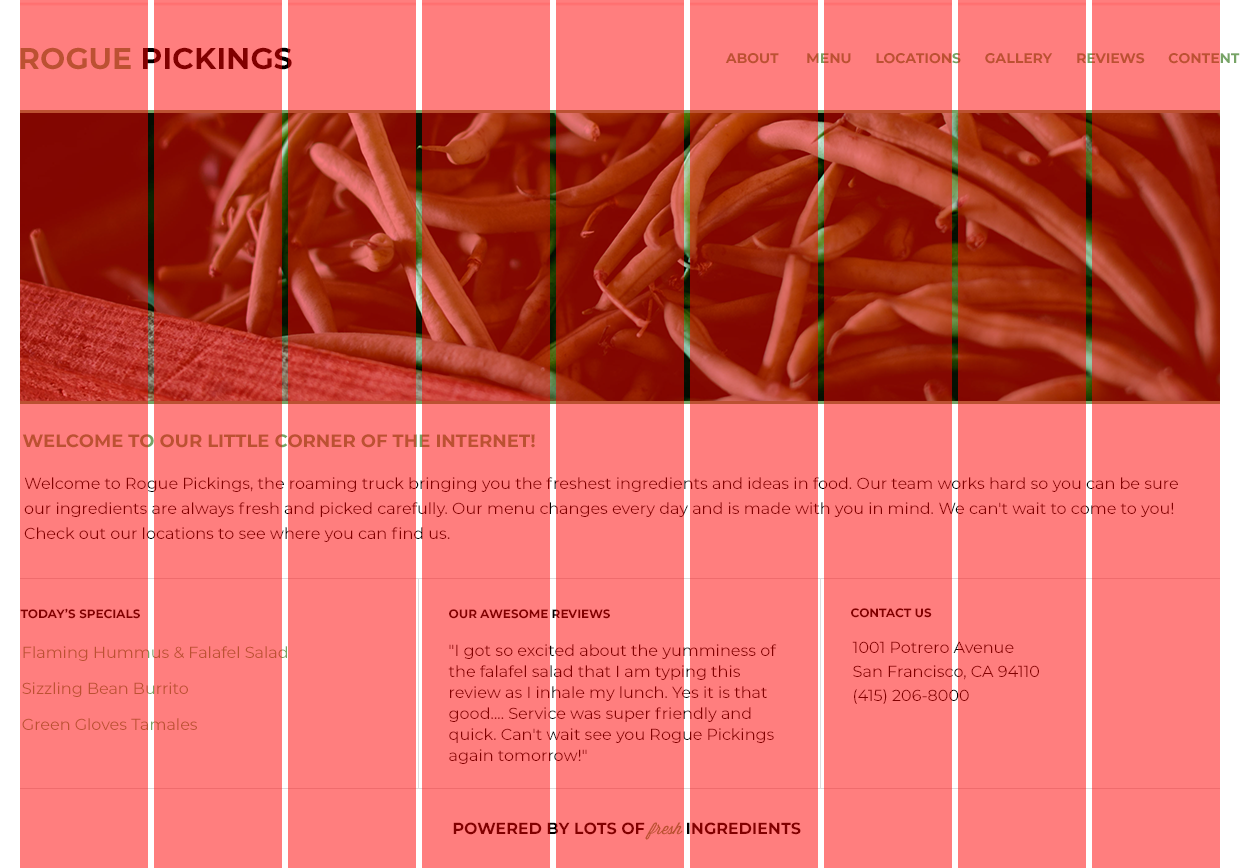
<style>
.page{position:relative;width:1240px;height:868px;background:#ff7e7e}
.page>*{position:absolute;margin:0}
.t1{font:30px "Montserrat-Bold";text-transform:uppercase}
.t2{font:14px "Montserrat-Bold";color:#bc5132;text-transform:uppercase}
.t3{font:18px "Montserrat-Bold";color:#bc5132;text-transform:uppercase}
.t4{font:16px/25px "Montserrat-Regular";color:#810000}
.t5{font:12px "Montserrat-Bold";color:#810000;text-transform:uppercase}
.t6{font:16px/24px "Montserrat-Regular";color:#810000}
.t7{font:16px/18px "Montserrat-Regular";color:#bc5132}
.t8{font:16px/21px "Montserrat-Regular";color:#810000}
.t9{font:16px "Montserrat-Bold";color:#810000;text-transform:uppercase}
.t10{font:16px "Wisdom-Script";color:#bc5132}
</style>
<div class="page">
<p class="t1" style="left:20px;top:47px;width:272px;height:23px">Rogue Pickings</p>
<p class="t2" style="left:725px;top:53px;width:515px;height:11px">about       menu      locations      GALLERY      REVIEWS      CONTENT</p>
<p class="t3" style="left:22px;top:434px;width:513px;height:14px">Welcome to our little corner of the internet!</p>
<p class="t4" style="left:24px;top:477px;width:1154px;height:65px">Welcome to Rogue Pickings, the roaming truck bringing you the freshest ingredients and ideas in food. Our team works hard so you can be sure our ingredients are always fresh and picked carefully. Our menu changes every day and is made with you in mind. We can't wait to come to you! Check out our locations to see where you can find us.</p>
<p class="t5" style="left:20px;top:608px;width:120px;height:11px">Today’s Specials</p>
<p class="t5" style="left:449px;top:609px;width:161px;height:10px">OUR AWESOME REVIEWS</p>
<p class="t5" style="left:851px;top:608px;width:81px;height:10px">CONTACT US</p>
<p class="t6" style="left:852px;top:641px;width:187px;height:63px">1001 Potrero Avenue<br>San Francisco, CA 94110<br>(415) 206-8000</p>
<p class="t7" style="left:22px;top:646px;width:265px;height:84px">Flaming Hummus &amp; Falafel Salad<br><br>    Sizzling Bean Burrito<br><br>    Green Gloves Tamales</p>
<p class="t8" style="left:448px;top:644px;width:329px;height:120px">"I got so excited about the yumminess of the falafel salad that I am typing this review as I inhale my lunch. Yes it is that good.... Service was super friendly and quick. Can't wait see you Rogue Pickings again tomorrow!"</p>
<p class="t9" style="left:453px;top:822px;width:348px;height:13px">Powered By Lots of         Ingredients</p>
<p class="t10" style="left:645px;top:822px;width:38px;height:18px">fresh</p>
</div>
